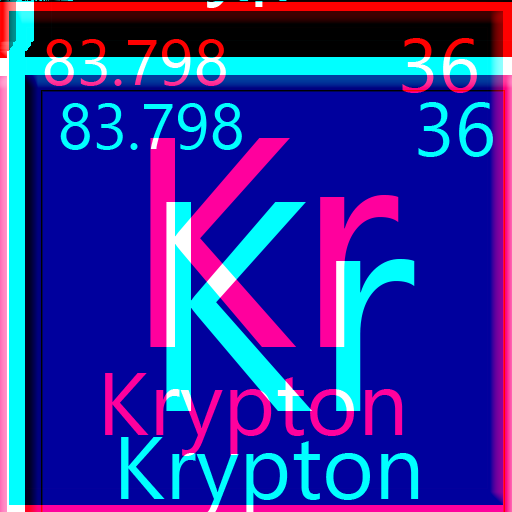
<style>
.page{position:relative;width:512px;height:512px;background:#00009d}
.page>*{position:absolute;margin:0}
.t1{font:64px "SegoeUI"}
.t2{font:76px "SegoeUI"}
.t3{font:298.7px "SegoeUI";color:#ff009d}
.t4{font:89.3px "SegoeUI";color:#ff009d}
</style>
<div class="page">
<p class="t1" style="left:44px;top:37px;width:182px;height:47px">83.798</p>
<p class="t2" style="left:402px;top:36px;width:75px;height:55px">36</p>
<p class="t3" style="left:150px;top:136px;width:249px;height:209px">Kr</p>
<p class="t4" style="left:105px;top:371px;width:298px;height:83px">Krypton</p>
</div>
